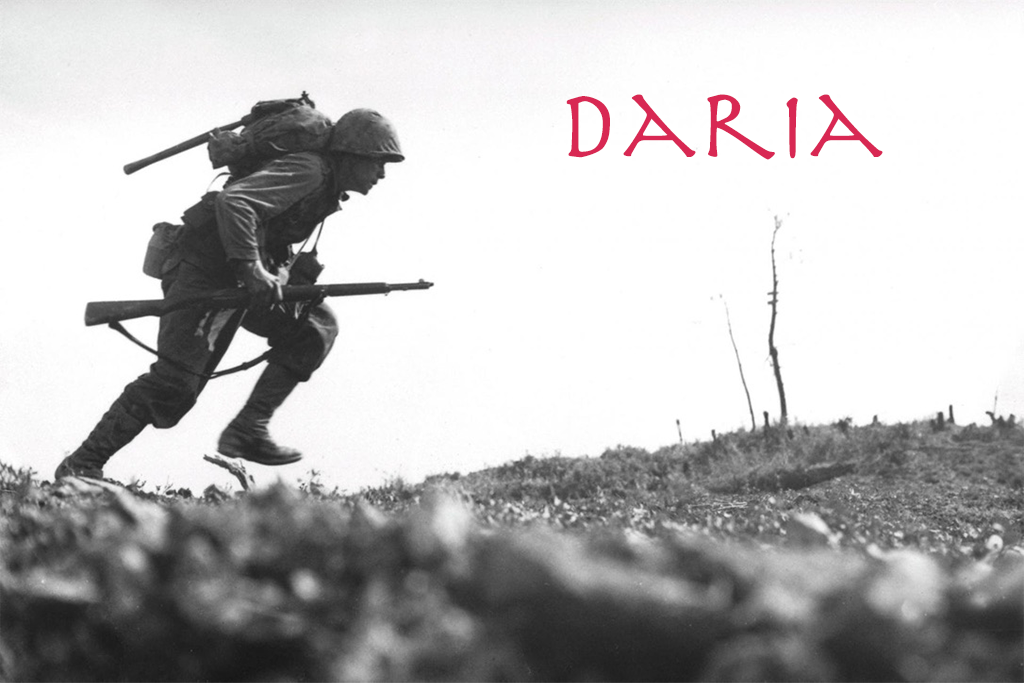
<style>
.page{position:relative;width:1024px;height:683px;background:#ffffff}
.page>*{position:absolute;margin:0}
.t1{font:100px "Herculanum";color:#d82853}
</style>
<div class="page">
<p class="t1" style="left:566px;top:94px;width:317px;height:66px">Daria</p>
</div>
